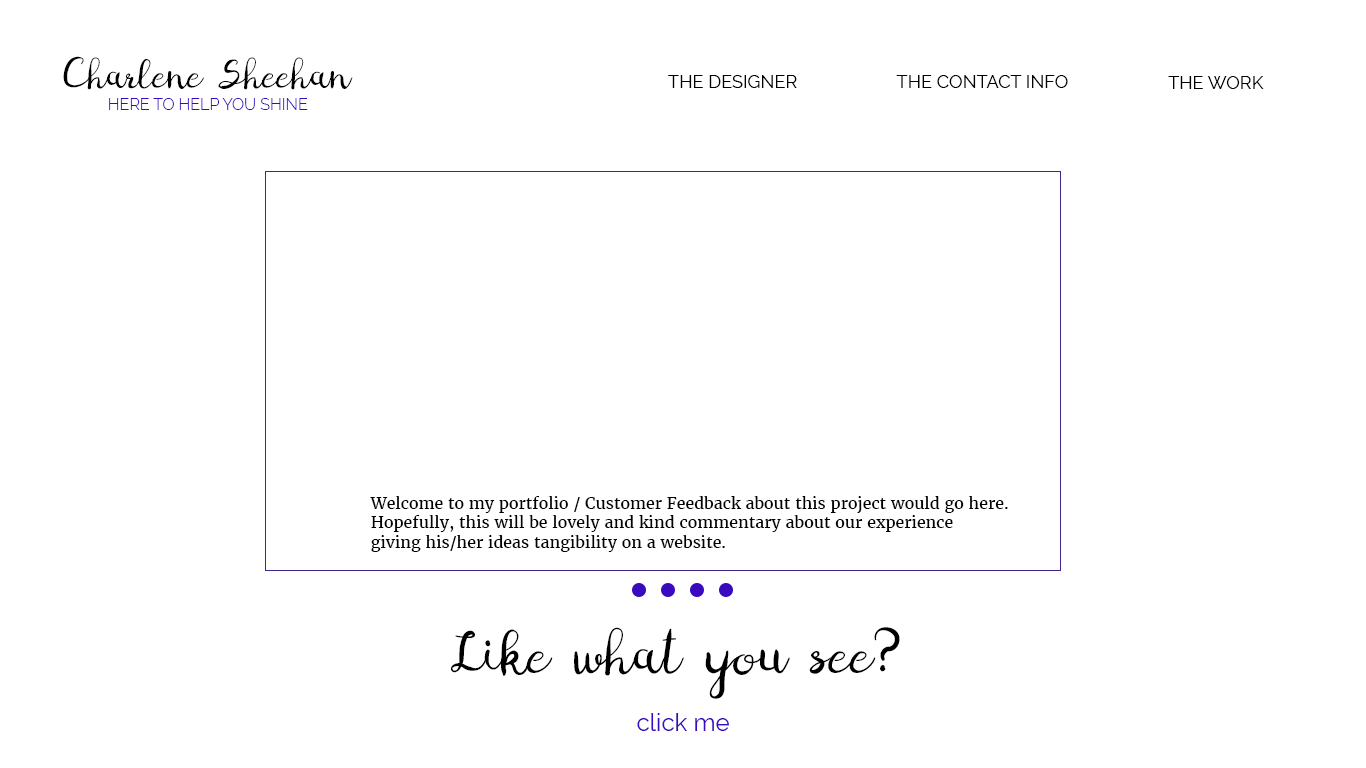
<style>
.page{position:relative;width:1366px;height:768px;background:#ffffff}
.page>*{position:absolute;margin:0}
.t1{font:20px "Digory_Doodles_PS";color:#000000}
.t2{font:18px "Raleway-Regular";letter-spacing:0.005em;color:#000000;text-transform:uppercase}
.t3{font:16px "Raleway-Light";color:#3a0abe;text-transform:uppercase}
.t4{font:16px "Merriweather-Regular";color:#000000}
.t5{font:30px "Digory_Doodles_PS";color:#000000}
.t6{font:24px "Raleway-Regular";color:#3a0abe}
</style>
<div class="page">
<p class="t1" style="left:63px;top:56px;width:290px;height:34px">Charlene Sheehan</p>
<p class="t2" style="left:668px;top:75px;width:129px;height:13px">THE DESIGNER</p>
<p class="t2" style="left:896px;top:75px;width:172px;height:13px">THE CONTACT INFO</p>
<p class="t2" style="left:1168px;top:76px;width:96px;height:13px">THE WORK</p>
<p class="t3" style="left:109px;top:98px;width:199px;height:12px">here to help you shine</p>
<p class="t4" style="left:370px;top:496px;width:638px;height:56px">Welcome to my portfolio / Customer Feedback about this project would go here. <br>Hopefully, this will be lovely and kind commentary about our experience <br>giving his/her ideas tangibility on a website.</p>
<p class="t5" style="left:451px;top:627px;width:449px;height:72px;text-align:center">Like what you see?</p>
<p class="t6" style="left:637px;top:713px;width:92px;height:18px">click me</p>
</div>
